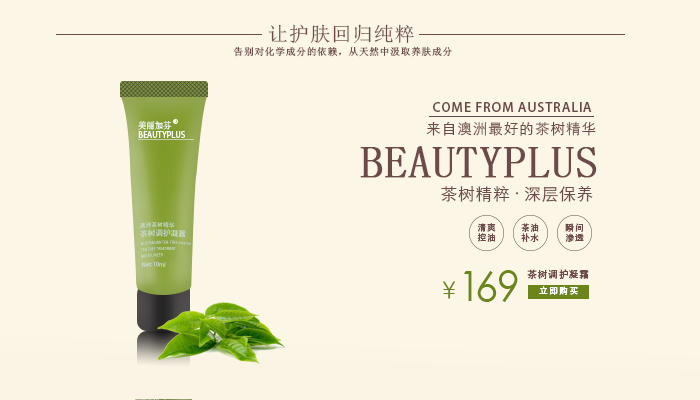
<style>
.page{position:relative;width:700px;height:400px;background:#fbf6e6}
.page>*{position:absolute;margin:0}
.t1{font:20px "SimSun";letter-spacing:0.06em;color:#6e4949}
.t2{font:9.9px "SimSun";letter-spacing:0.06em;color:#6e4949}
.t3{font:13.1px "AdobeHeitiStd-Regular";letter-spacing:0.06em;color:#6e4949}
.t4{font:9px "STZhongsong";color:#f2f8f3;scale:0.93 1}
.t5{font:3.9px "AdobeHeitiStd-Regular";color:#ffffff;font-weight:bold}
.t6{font:14.6px "STXihei";letter-spacing:0.06em;color:#6e4949}
.t7{font:8.5px "AdobeHeitiStd-Regular";color:#f9fbf9;text-decoration:underline;scale:0.93 1}
.t8{font:45.3px "SimSun";color:#6e4949;font-weight:bold}
.t9{font:16.8px "STXihei";letter-spacing:0.04em;color:#6e4949}
.t10{font:5.9px "AdobeHeitiStd-Regular";color:#ccd9cf}
.t11{font:7.8px "AdobeHeitiStd-Regular";color:#ccd9cf}
.t12{font:9px/10.2px "AdobeHeitiStd-Regular";letter-spacing:0.06em;color:#6e4949}
.t13{font:3.6px "AdobeHeitiStd-Regular"}
.t14{font:41.5px "STXihei";letter-spacing:-0.02em;color:#6b851b}
.t15{font:9.8px "AdobeHeitiStd-Regular";letter-spacing:0.06em;color:#6e4949}
.t16{font:9px "AdobeHeitiStd-Regular";letter-spacing:0.12em;color:#ffffff}
</style>
<div class="page">
<p class="t1" style="left:268px;top:24px;width:146px;height:20px">让护肤回归纯粹</p>
<p class="t2" style="left:234px;top:46px;width:218px;height:11px">告别对化学成分的依赖，从天然中汲取养肤成分</p>
<p class="t3" style="left:433px;top:102px;width:159px;height:10px">COME FROM AUSTRALIA</p>
<p class="t4" style="left:138px;top:121px;width:34px;height:9px">美丽加芬</p>
<p class="t5" style="left:173px;top:120px;width:4px;height:4px">R</p>
<p class="t6" style="left:426px;top:121px;width:170px;height:15px">来自澳洲最好的茶树精华</p>
<p class="t7" style="left:138px;top:131px;width:56px;height:9px">BEAUTYPLUS</p>
<p class="t8" style="left:360px;top:146px;width:237px;height:32px">BEAUTYPLUS</p>
<p class="t9" style="left:441px;top:186px;width:152px;height:16px">茶树精粹.深层保养</p>
<p class="t10" style="left:140px;top:222px;width:35px;height:7px">澳洲茶树精华</p>
<p class="t11" style="left:140px;top:229px;width:46px;height:9px">茶树调护凝露</p>
<p class="t12" style="left:477px;top:223px;width:19px;height:19px">清爽<br>控油</p>
<p class="t12" style="left:521px;top:223px;width:18px;height:20px">茶油<br>补水</p>
<p class="t12" style="left:565px;top:223px;width:19px;height:19px">瞬间<br>渗透</p>
<p class="t13" style="left:140px;top:240px;width:51px;height:18px">AUSTRALIAN TEA  TREE essence <br>TEA TREE TREATMENT <br>MOISTURIZER</p>
<p class="t10" style="left:142px;top:261px;width:24px;height:7px">Net:10ml</p>
<p class="t14" style="left:443px;top:270px;width:75px;height:32px">￥169</p>
<p class="t15" style="left:527px;top:269px;width:62px;height:10px">茶树调护凝霜</p>
<p class="t16" style="left:539px;top:286px;width:39px;height:9px">立即购买</p>
</div>
